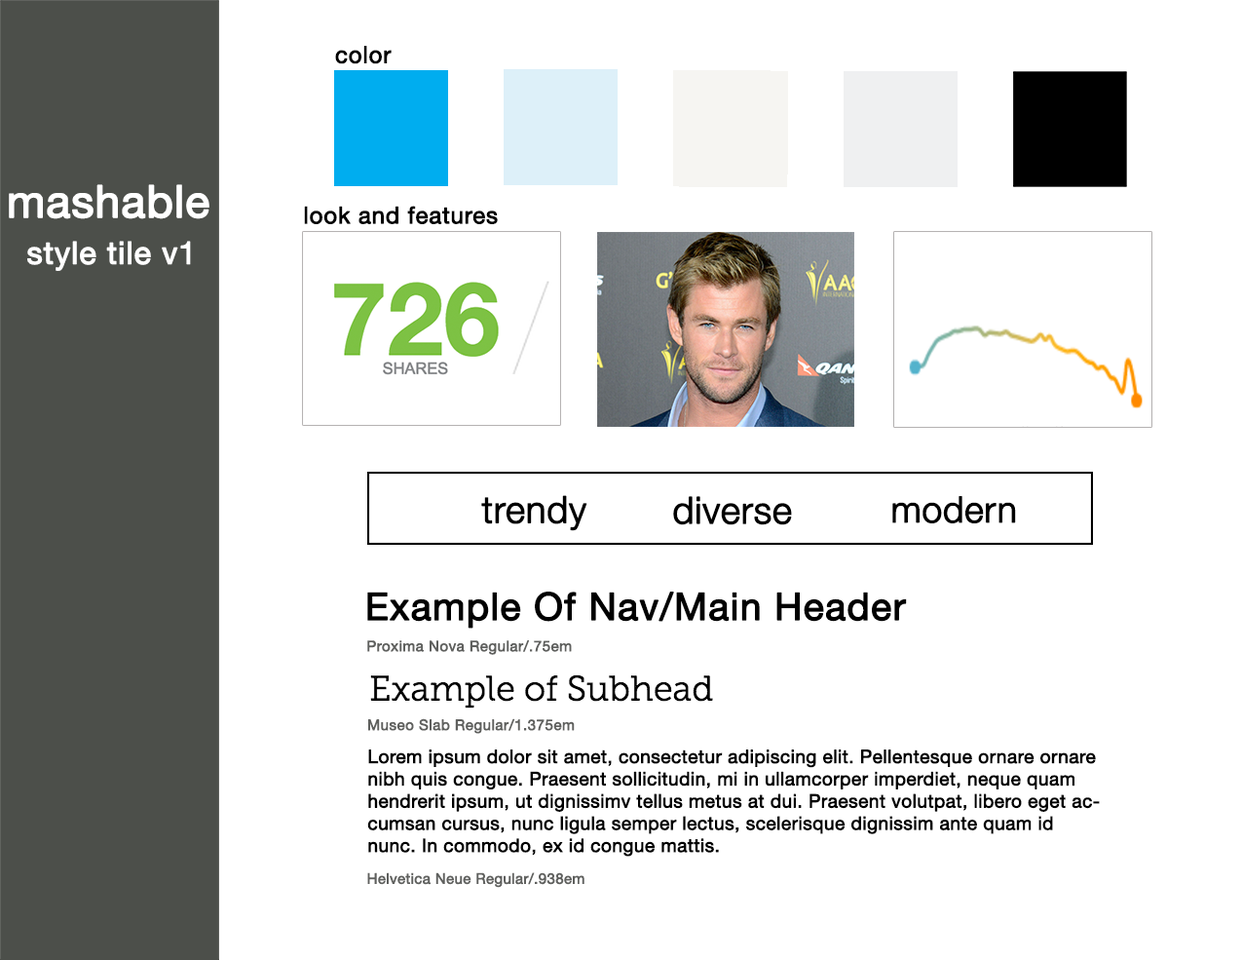
<style>
.page{position:relative;width:1242px;height:960px;background:#ffffff}
.page>*{position:absolute;margin:0}
.t1{font:23.4px "HelveticaNeue";letter-spacing:0.01em;color:#000000;font-weight:bold}
.t2{font:44.8px "HelveticaNeue";color:#ffffff;font-weight:bold}
.t3{font:46.8px "HelveticaNeue";color:#ffffff;font-weight:bold}
.t4{font:31.2px "HelveticaNeue";letter-spacing:0.01em;color:#ffffff;font-weight:bold}
.t5{font:37px "HelveticaNeue-Light";color:#000000;font-weight:bold}
.t6{font:36.1px "HelveticaNeue-Light";color:#000000;font-weight:bold}
.t7{font:38px "HelveticaNeue";letter-spacing:0.01em;color:#000000;font-weight:bold}
.t8{font:14.6px "HelveticaNeue";letter-spacing:0.01em;color:#5f605e;font-weight:bold}
.t9{font:18.5px "HelveticaNeue";color:#000000;font-weight:bold}
.t10{font:14.6px "HelveticaNeue";color:#5f605e;font-weight:bold}
</style>
<div class="page">
<p class="t1" style="left:335px;top:46px;width:57px;height:18px">color</p>
<p class="t2" style="left:9px;top:184px;width:200px;height:35px"><span class="t3"><br></span>mashable</p>
<p class="t1" style="left:304px;top:206px;width:194px;height:18px">look and features</p>
<p class="t4" style="left:27px;top:241px;width:164px;height:30px">style tile v1</p>
<p class="t5" style="left:481px;top:495px;width:107px;height:36px">trendy</p>
<p class="t5" style="left:673px;top:496px;width:119px;height:29px">diverse</p>
<p class="t6" style="left:893px;top:496px;width:123px;height:27px">modern</p>
<p class="t7" style="left:367px;top:591px;width:540px;height:37px">Example Of Nav/Main Header</p>
<p class="t8" style="left:367px;top:640px;width:205px;height:15px">Proxima Nova Regular/.75em</p>
<p class="t8" style="left:368px;top:718px;width:207px;height:16px">Museo Slab Regular/1.375em</p>
<p class="t9" style="left:367px;top:749px;width:733px;height:108px">Lorem ipsum dolor sit amet, consectetur adipiscing elit. Pellentesque ornare ornare nibh quis congue. Praesent sollicitudin, mi in ullamcorper imperdiet, neque quam hendrerit ipsum, ut dignissimv tellus metus at dui. Praesent volutpat, libero eget accumsan cursus, nunc ligula semper lectus, scelerisque dignissim ante quam id nunc. In commodo, ex id congue mattis.</p>
<p class="t10" style="left:367px;top:872px;width:218px;height:16px">Helvetica Neue Regular/.938em</p>
</div>
